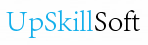
<style>
.page{position:relative;width:148px;height:45px;background:#fefefe}
.page>*{position:absolute;margin:0}
.t1{font:30px "AdobeSongStd-Light";color:#13afeb}
.t2{font:30px "AdobeSongStd-Light";color:#000000}
</style>
<div class="page">
<p class="t1" style="left:6px;top:10px;width:134px;height:28px">UpSkill<span class="t2">Soft</span></p>
</div>
